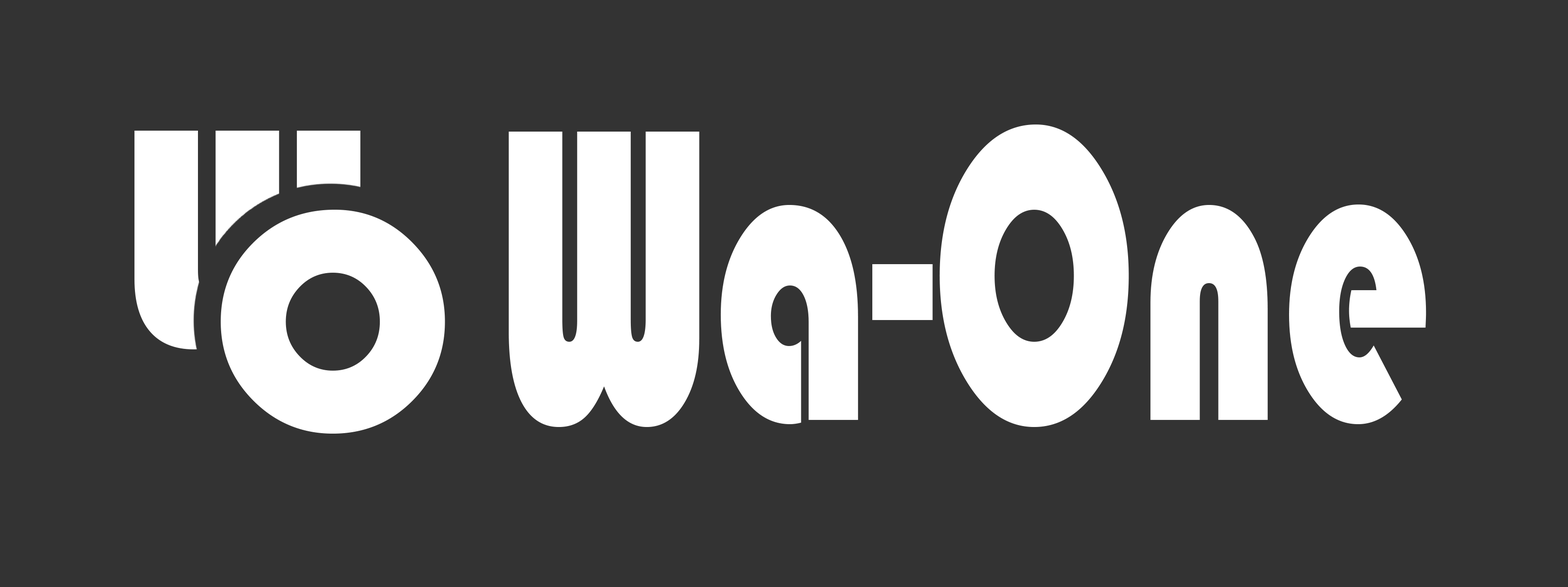
<style>
.page{position:relative;width:1568px;height:587px;background:#333333}
.page>*{position:absolute;margin:0}
.t1{font:432.7px "Bauhaus93";color:#ffffff;scale:0.62 1}
.t2{font:320.3px "Bauhaus93";color:#ffffff}
</style>
<div class="page">
<p class="t1" style="left:509px;top:125px;width:917px;height:302px">Wa-One</p>
<p class="t2" style="left:221px;top:210px;width:224px;height:224px">O</p>
</div>
